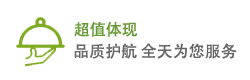
<style>
.page{position:relative;width:250px;height:80px;background:#ffffff}
.page>*{position:absolute;margin:0}
.t1{font:16px "AdobeHeitiStd-Regular";color:#669933}
.t2{font:16px "AdobeHeitiStd-Regular";color:#666666}
</style>
<div class="page">
<p class="t1" style="left:74px;top:21px;width:64px;height:16px">超值体现</p>
<p class="t2" style="left:74px;top:43px;width:163px;height:16px">品质护航 全天为您服务</p>
</div>
